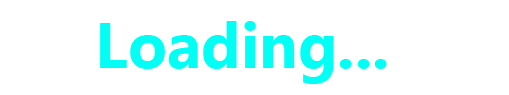
<style>
.page{position:relative;width:509px;height:95px;background:#ffffff}
.page>*{position:absolute;margin:0}
.t1{font:64px "MicrosoftTaiLe-Bold";color:#01fff6}
</style>
<div class="page">
<p class="t1" style="left:100px;top:21px;width:287px;height:63px">Loading...</p>
</div>
